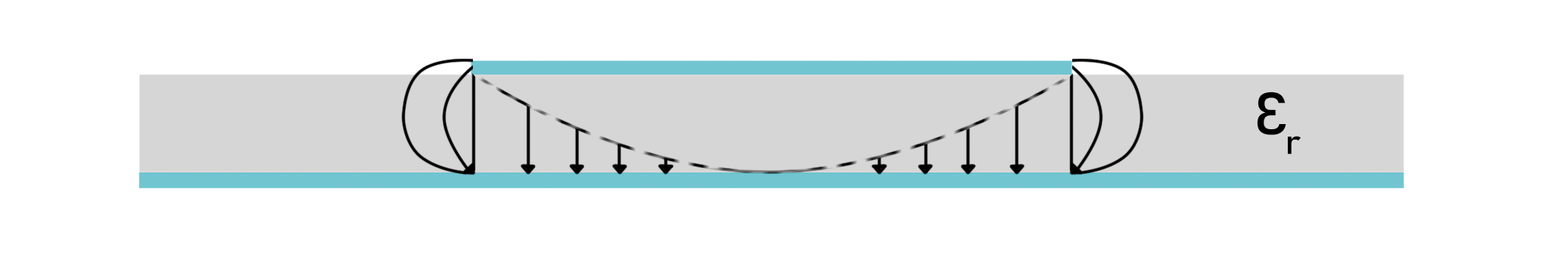
<style>
.page{position:relative;width:1568px;height:257px;background:#ffffff}
.page>*{position:absolute;margin:0}
.t1{font:59px "Bahnschrift";letter-spacing:-0.06em;color:#000000;font-weight:bold;font-style:italic;scale:1.1 1}
</style>
<div class="page">
<p class="t1" style="left:1257px;top:92px;width:44px;height:62px">Ɛr</p>
</div>
